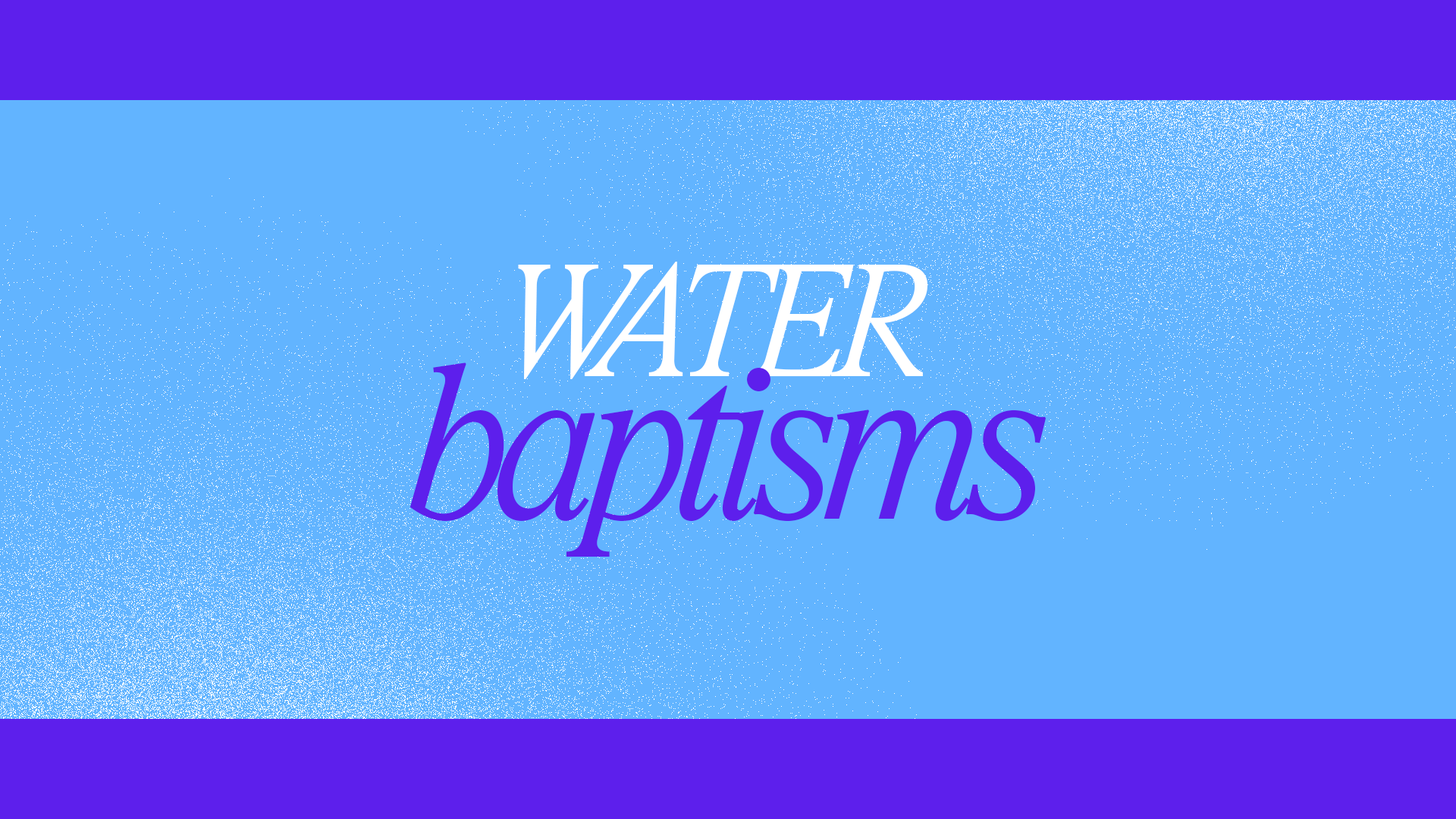
<style>
.page{position:relative;width:1456px;height:819px;background:#62b4ff}
.page>*{position:absolute;margin:0}
.t1{font:152.2px "RyhmesText-LightItalic";letter-spacing:-0.08em;color:#ffffff}
.t2{font:209.7px "RyhmesText-LightItalic";letter-spacing:-0.08em;color:#5d1fec}
</style>
<div class="page">
<p class="t1" style="left:518px;top:262px;width:409px;height:117px">WATER</p>
<p class="t2" style="left:409px;top:362px;width:637px;height:195px">baptisms</p>
</div>
